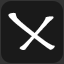
<style>
.page{position:relative;width:64px;height:64px;background:#1a1a1a}
.page>*{position:absolute;margin:0}
.t1{font:60px "Herculanum";color:#ffffff}
</style>
<div class="page">
<p class="t1" style="left:8px;top:12px;width:47px;height:38px">X</p>
</div>
